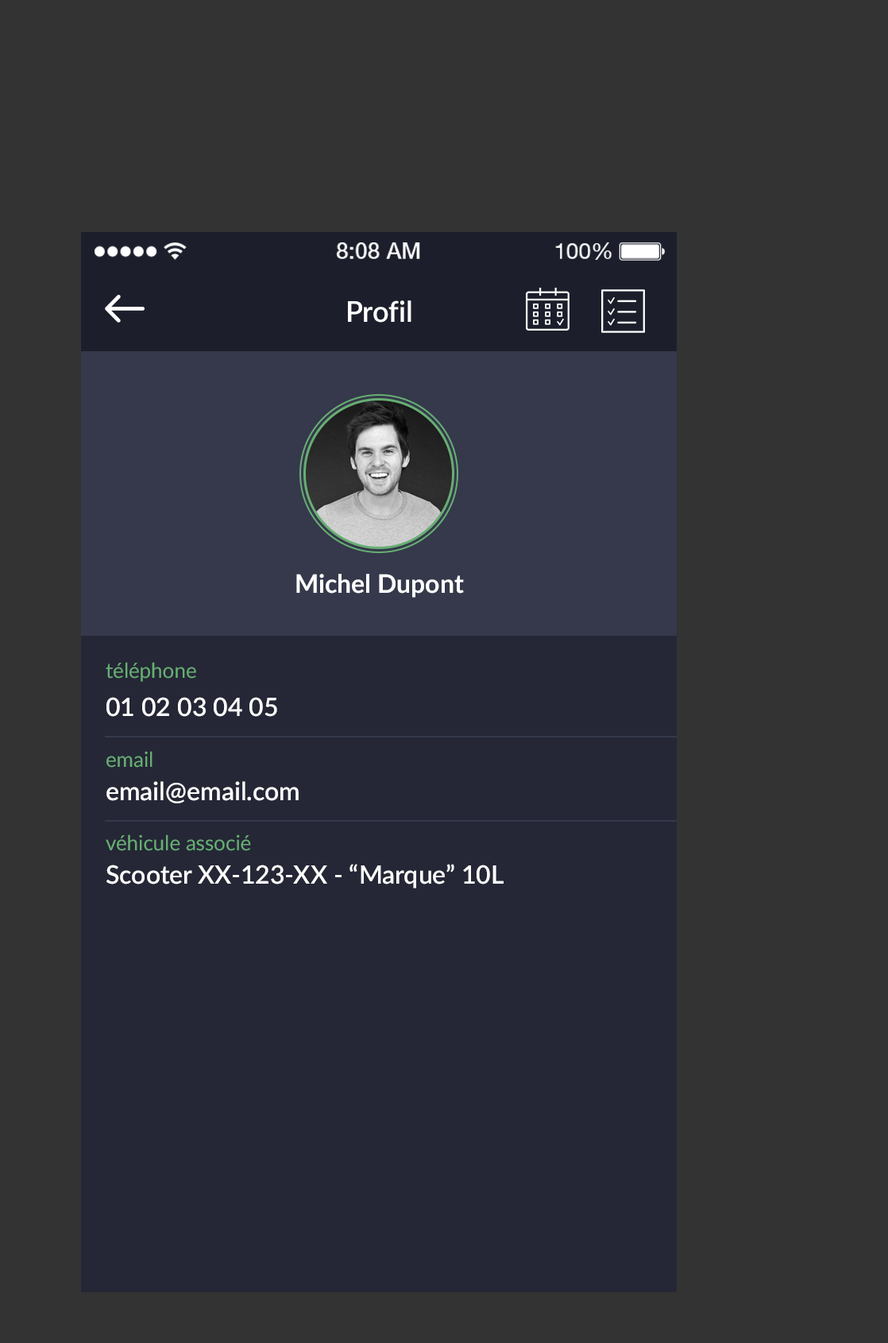
<style>
.page{position:relative;width:888px;height:1343px;background:#333333}
.page>*{position:absolute;margin:0}
.t1{font:28.6px "Lato-Semibold";color:#ffffff}
.t2{font:25.4px "Lato-Bold";color:#ffffff}
.t3{font:20.7px "Lato-Regular";color:#67ae73}
.t4{font:25.4px "Lato-Semibold";color:#ffffff}
</style>
<div class="page">
<p class="t1" style="left:348px;top:300px;width:64px;height:23px">Profil</p>
<p class="t2" style="left:296px;top:574px;width:168px;height:23px">Michel Dupont</p>
<p class="t3" style="left:106px;top:662px;width:90px;height:20px">téléphone</p>
<p class="t4" style="left:106px;top:697px;width:171px;height:20px">01 02 03 04 05</p>
<p class="t3" style="left:106px;top:751px;width:47px;height:16px">email</p>
<p class="t4" style="left:106px;top:781px;width:193px;height:22px">email@email.com</p>
<p class="t3" style="left:106px;top:834px;width:145px;height:17px">véhicule associé</p>
<p class="t4" style="left:106px;top:864px;width:398px;height:24px">Scooter XX-123-XX - “Marque” 10L</p>
</div>
